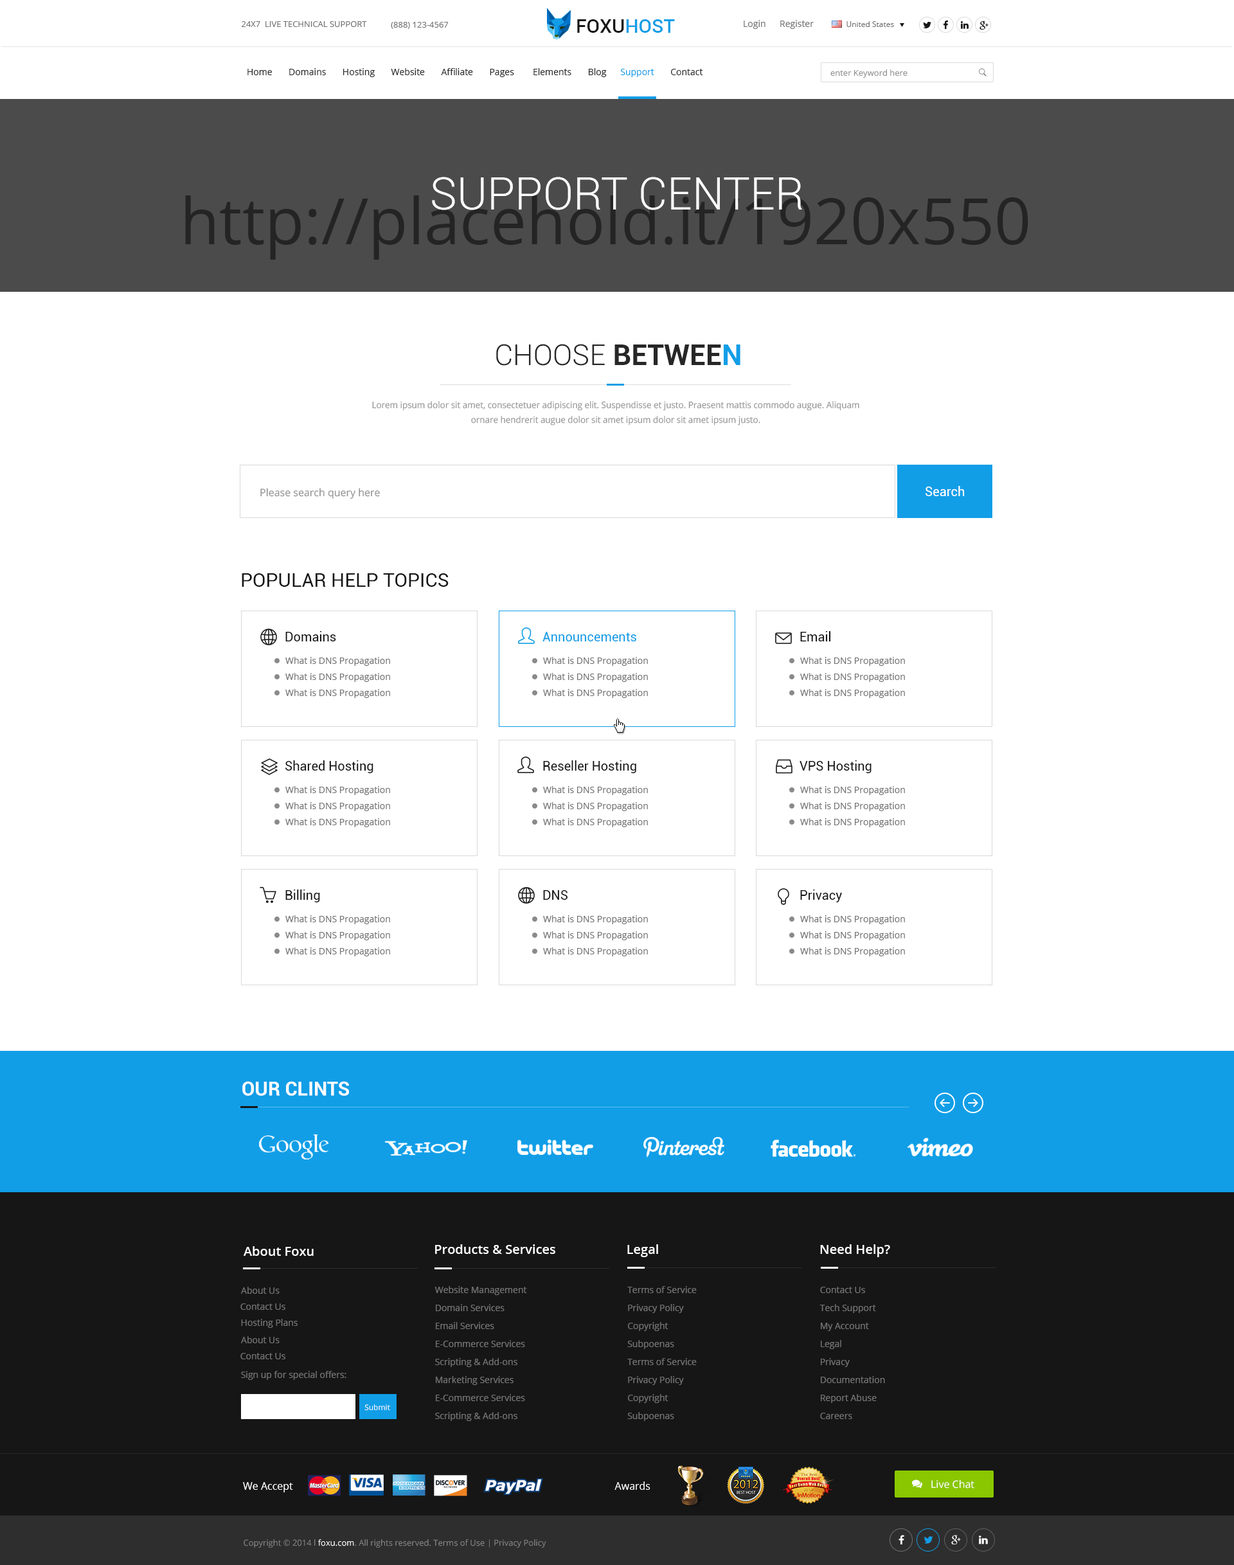
<style>
.page{position:relative;width:1234px;height:1565px;background:#ffffff}
.page>*{position:absolute;margin:0}
.t1{font:8.4px "OpenSans";color:#727272;text-transform:uppercase}
.t2{font:19.3px "Roboto-Medium";color:#161616;text-transform:uppercase}
.t3{font:19.3px "Roboto-Medium";color:#119ee7;text-transform:uppercase}
.t4{font:9px "OpenSans";color:#727272}
.t5{font:7.7px "OpenSans";color:#727272}
.t6{font:9px "OpenSans";color:#272727}
.t7{font:9px "OpenSans";color:#119ee7}
.t8{font:8.4px "OpenSans";color:#949494}
.t9{font:45px "Roboto-Light";color:#ffffff;text-transform:uppercase}
.t10{font:64.3px "OpenSans";color:#242323}
.t11{font:28.9px "Roboto-Light";color:#272727;text-transform:uppercase}
.t12{font:28.9px "Roboto-Bold";color:#272727;text-transform:uppercase}
.t13{font:28.9px "Roboto-Bold";color:#119ee7;text-transform:uppercase}
.t14{font:8.9px/14.7px "OpenSans";color:#969696;scale:0.97 1}
.t15{font:10.3px "OpenSans";color:#969696}
.t16{font:12.9px "Roboto-Regular";color:#ffffff}
.t17{font:19.3px "Roboto-Regular";color:#161616;text-transform:uppercase}
.t18{font:12.9px "Roboto-Regular";color:#161616}
.t19{font:12.9px "Roboto-Regular";color:#119ee7}
.t20{font:19.3px "Roboto-Bold";color:#ffffff;text-transform:uppercase}
.t21{font:12.9px "OpenSans-Semibold";color:#ffffff}
.t22{font:9px "OpenSans";color:#737373}
.t23{font:9px/18px "OpenSans";color:#737373}
.t24{font:7.7px "OpenSans";color:#ffffff}
.t25{font:10.3px "OpenSans";color:#ffffff}
.t26{font:8.4px "OpenSans";color:#858585}
.t27{font:8.4px "OpenSans";color:#ffffff}
</style>
<div class="page">
<p class="t1" style="left:242px;top:21px;width:125px;height:6px">24x7  live Technical Support</p>
<p class="t1" style="left:391px;top:22px;width:58px;height:7px">(888) 123-4567</p>
<p class="t2" style="left:577px;top:19px;width:98px;height:14px">foxu<span class="t3">host</span></p>
<p class="t4" style="left:744px;top:20px;width:22px;height:9px">Login</p>
<p class="t4" style="left:780px;top:20px;width:34px;height:9px">Register</p>
<p class="t5" style="left:847px;top:21px;width:47px;height:6px">United States</p>
<p class="t6" style="left:248px;top:68px;width:455px;height:9px">Home       Domains       Hosting       Website       Affiliate       Pages        Elements       Blog      <span class="t7">Support </span>      Contact</p>
<p class="t8" style="left:831px;top:69px;width:77px;height:9px">enter Keyword here</p>
<p class="t9" style="left:432px;top:177px;width:370px;height:33px">Support center</p>
<p class="t10" style="left:185px;top:195px;width:844px;height:65px">http://placehold.it/1920x550</p>
<p class="t11" style="left:496px;top:344px;width:245px;height:22px">choose<span class="t12"> betwee</span><span class="t13">n</span></p>
<p class="t14" style="left:372px;top:401px;width:488px;height:25px;text-align:center">Lorem ipsum dolor sit amet, consectetuer adipiscing elit. Suspendisse et justo. Praesent mattis commodo augue. Aliquam ornare hendrerit augue dolor sit amet ipsum dolor sit amet ipsum justo.</p>
<p class="t15" style="left:260px;top:488px;width:120px;height:11px">Please search query here</p>
<p class="t16" style="left:926px;top:486px;width:39px;height:10px">Search</p>
<p class="t17" style="left:242px;top:573px;width:207px;height:14px">Popular Help Topics</p>
<p class="t18" style="left:285px;top:631px;width:51px;height:11px">Domains</p>
<p class="t19" style="left:543px;top:632px;width:93px;height:10px">Announcements</p>
<p class="t18" style="left:800px;top:631px;width:31px;height:11px">Email</p>
<p class="t4" style="left:285px;top:657px;width:105px;height:9px">What is DNS Propagation</p>
<p class="t4" style="left:543px;top:657px;width:105px;height:9px">What is DNS Propagation</p>
<p class="t4" style="left:800px;top:657px;width:105px;height:9px">What is DNS Propagation</p>
<p class="t4" style="left:285px;top:673px;width:105px;height:9px">What is DNS Propagation</p>
<p class="t4" style="left:543px;top:673px;width:105px;height:9px">What is DNS Propagation</p>
<p class="t4" style="left:800px;top:673px;width:105px;height:9px">What is DNS Propagation</p>
<p class="t4" style="left:285px;top:689px;width:105px;height:9px">What is DNS Propagation</p>
<p class="t4" style="left:543px;top:689px;width:105px;height:9px">What is DNS Propagation</p>
<p class="t4" style="left:800px;top:689px;width:105px;height:9px">What is DNS Propagation</p>
<p class="t18" style="left:285px;top:760px;width:89px;height:13px">Shared Hosting</p>
<p class="t18" style="left:543px;top:760px;width:93px;height:13px">Reseller Hosting</p>
<p class="t18" style="left:800px;top:760px;width:72px;height:13px">VPS Hosting</p>
<p class="t4" style="left:285px;top:786px;width:105px;height:9px">What is DNS Propagation</p>
<p class="t4" style="left:543px;top:786px;width:105px;height:9px">What is DNS Propagation</p>
<p class="t4" style="left:800px;top:786px;width:105px;height:9px">What is DNS Propagation</p>
<p class="t4" style="left:285px;top:802px;width:105px;height:9px">What is DNS Propagation</p>
<p class="t4" style="left:543px;top:802px;width:105px;height:9px">What is DNS Propagation</p>
<p class="t4" style="left:800px;top:802px;width:105px;height:9px">What is DNS Propagation</p>
<p class="t4" style="left:285px;top:818px;width:105px;height:9px">What is DNS Propagation</p>
<p class="t4" style="left:543px;top:818px;width:105px;height:9px">What is DNS Propagation</p>
<p class="t4" style="left:800px;top:818px;width:105px;height:9px">What is DNS Propagation</p>
<p class="t18" style="left:285px;top:890px;width:35px;height:13px">Billing</p>
<p class="t18" style="left:543px;top:890px;width:25px;height:10px">DNS</p>
<p class="t18" style="left:800px;top:890px;width:42px;height:13px">Privacy</p>
<p class="t4" style="left:285px;top:915px;width:105px;height:9px">What is DNS Propagation</p>
<p class="t4" style="left:543px;top:915px;width:105px;height:9px">What is DNS Propagation</p>
<p class="t4" style="left:800px;top:915px;width:105px;height:9px">What is DNS Propagation</p>
<p class="t4" style="left:285px;top:932px;width:105px;height:9px">What is DNS Propagation</p>
<p class="t4" style="left:543px;top:932px;width:105px;height:9px">What is DNS Propagation</p>
<p class="t4" style="left:800px;top:932px;width:105px;height:9px">What is DNS Propagation</p>
<p class="t4" style="left:285px;top:948px;width:105px;height:9px">What is DNS Propagation</p>
<p class="t4" style="left:543px;top:948px;width:105px;height:9px">What is DNS Propagation</p>
<p class="t4" style="left:800px;top:948px;width:105px;height:9px">What is DNS Propagation</p>
<p class="t20" style="left:242px;top:1081px;width:107px;height:15px">Our Clints</p>
<p class="t21" style="left:244px;top:1246px;width:70px;height:10px">About Foxu</p>
<p class="t21" style="left:435px;top:1245px;width:120px;height:9px">Products &amp; Services</p>
<p class="t21" style="left:627px;top:1245px;width:31px;height:12px">Legal</p>
<p class="t21" style="left:820px;top:1245px;width:70px;height:12px">Need Help?</p>
<p class="t22" style="left:241px;top:1287px;width:39px;height:7px">About Us</p>
<p class="t23" style="left:435px;top:1286px;width:92px;height:135px">Website Management<br>    Domain Services<br>    Email Services<br>    E-Commerce Services<br>    Scripting &amp; Add-ons<br>    Marketing Services<br>    E-Commerce Services<br>    Scripting &amp; Add-ons</p>
<p class="t23" style="left:627px;top:1286px;width:70px;height:135px">Terms of Service<br>Privacy Policy<br>Copyright<br>Subpoenas<br>Terms of Service<br>Privacy Policy<br>Copyright<br>Subpoenas</p>
<p class="t23" style="left:820px;top:1287px;width:65px;height:132px">Contact Us<br>    Tech Support<br>    My Account<br>    Legal<br>    Privacy<br>    Documentation<br>    Report Abuse<br>    Careers</p>
<p class="t22" style="left:240px;top:1304px;width:45px;height:6px">Contact Us</p>
<p class="t22" style="left:241px;top:1319px;width:57px;height:9px">Hosting Plans</p>
<p class="t22" style="left:241px;top:1336px;width:39px;height:8px">About Us</p>
<p class="t22" style="left:240px;top:1353px;width:45px;height:7px">Contact Us</p>
<p class="t22" style="left:241px;top:1371px;width:105px;height:9px">Sign up for special offers:</p>
<p class="t24" style="left:364px;top:1405px;width:26px;height:5px">Submit</p>
<p class="t25" style="left:615px;top:1482px;width:36px;height:8px">Awards</p>
<p class="t25" style="left:932px;top:1480px;width:43px;height:9px">Live Chat</p>
<p class="t25" style="left:243px;top:1482px;width:50px;height:11px">We Accept</p>
<p class="t26" style="left:244px;top:1540px;width:302px;height:8px">Copyright © 2014 l <span class="t27">foxu.com</span>. All rights reserved. Terms of Use | Privacy Policy</p>
</div>
